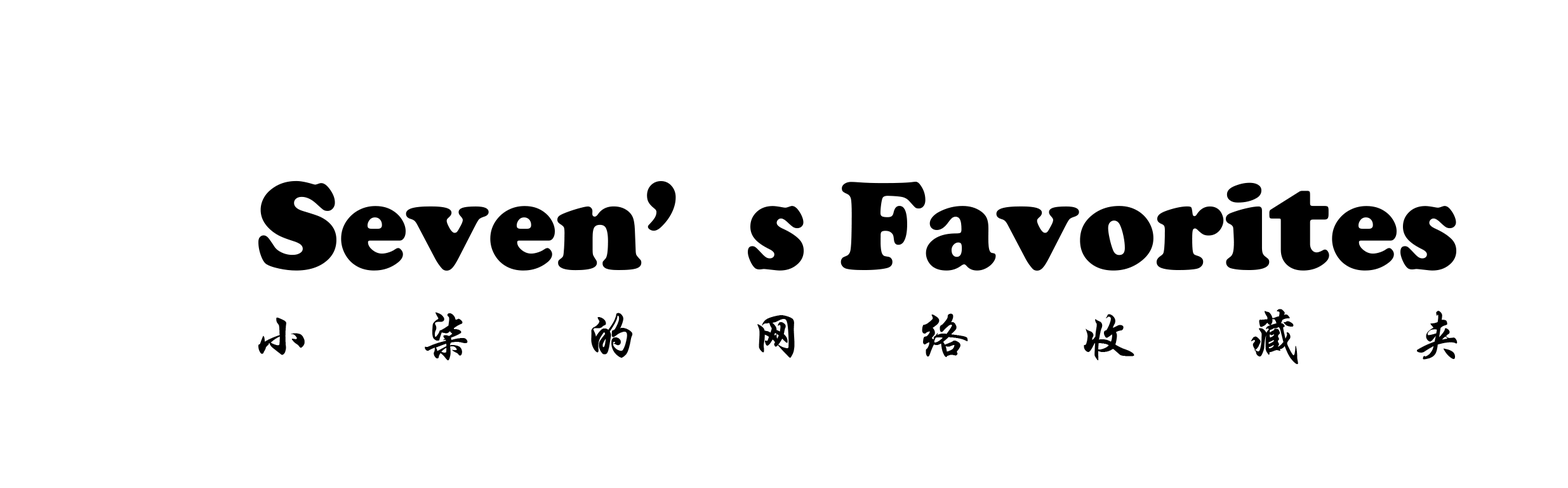
<style>
.page{position:relative;width:1568px;height:488px;background:#ffffff}
.page>*{position:absolute;margin:0}
.t1{font:128.7px "CooperBlack";color:#000000}
.t2{font:58.2px "STXingkai";letter-spacing:1.84em;color:#000000}
</style>
<div class="page">
<p class="t1" style="left:258px;top:180px;width:1198px;height:90px">Seven’s Favorites</p>
<p class="t2" style="left:258px;top:309px;width:1200px;height:55px">小柒的网络收藏夹</p>
</div>
